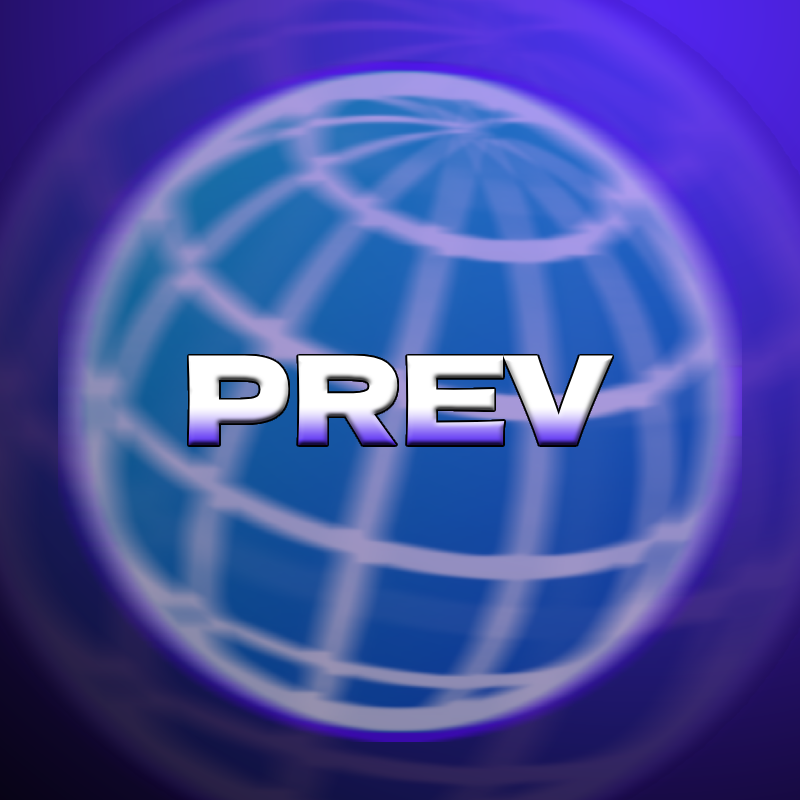
<style>
.page{position:relative;width:800px;height:800px}
.page>*{position:absolute;margin:0}
.t1{font:123.3px "DelaGothicOne-Regular";color:#ffffff}
</style>
<div class="page">
<p class="t1" style="left:188px;top:355px;width:425px;height:91px">PREV</p>
</div>
